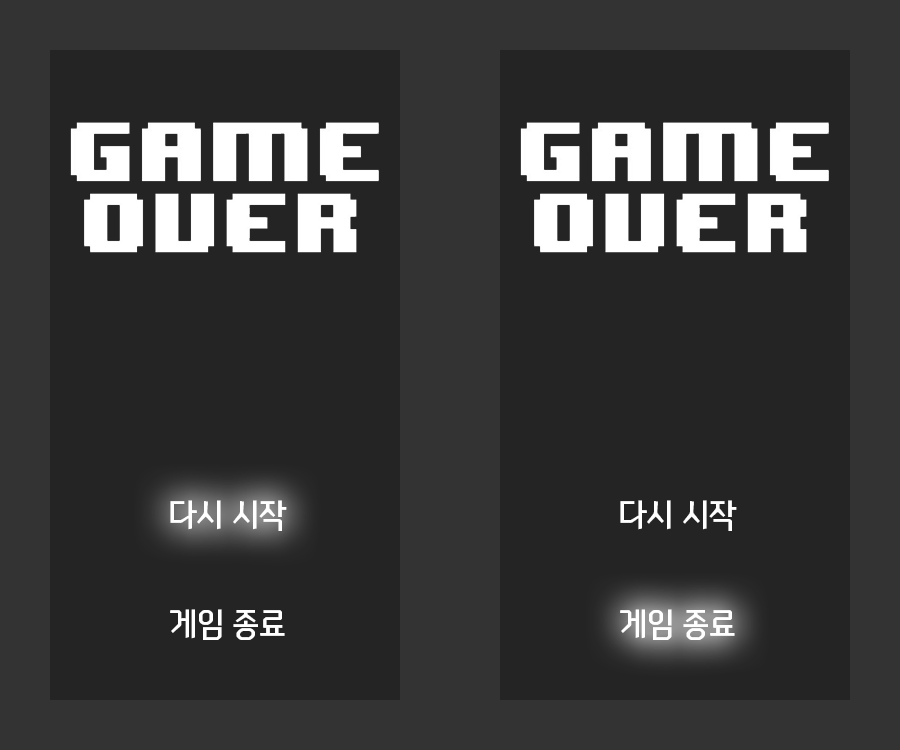
<style>
.page{position:relative;width:900px;height:750px;background:#242424}
.page>*{position:absolute;margin:0}
.t1{font:33.7px "NEXONFootballGothicL";color:#ffffff}
</style>
<div class="page">
<p class="t1" style="left:170px;top:500px;width:117px;height:31px">다시 시작</p>
<p class="t1" style="left:620px;top:500px;width:117px;height:31px">다시 시작</p>
<p class="t1" style="left:170px;top:609px;width:115px;height:31px">게임 종료</p>
<p class="t1" style="left:620px;top:609px;width:115px;height:31px">게임 종료</p>
</div>
